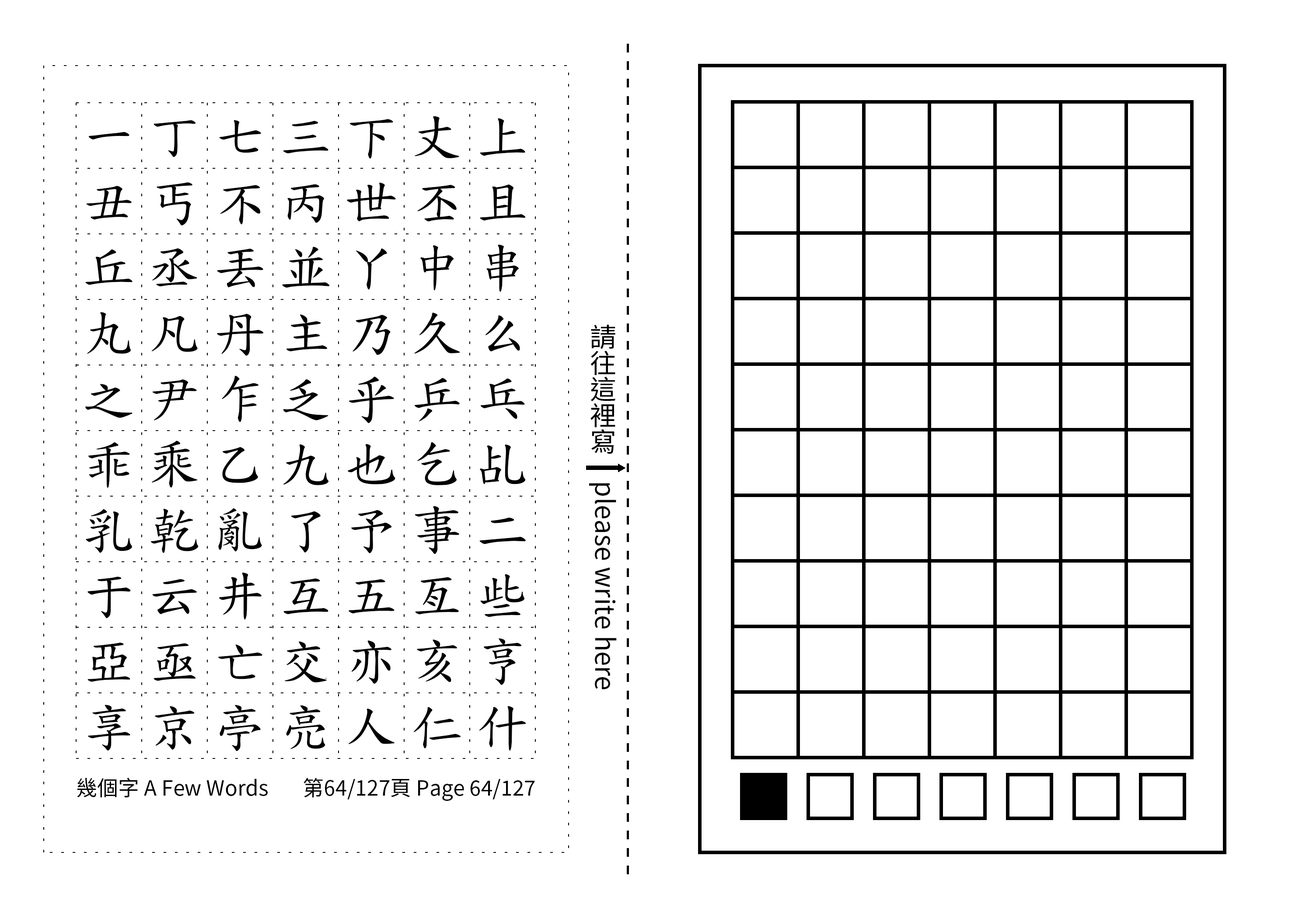
<style>
.page{position:relative;width:1299px;height:918px;background:#ffffff}
.page>*{position:absolute;margin:0}
.t1{font:52.5px/65.6px "TW-Kai-98_1";letter-spacing:0.25em;color:#000000}
.t2{font:26.2px "SourceHanSansTC-Regular";color:#000000}
.t3{font:21px "SourceHanSansTC-Regular";color:#000000}
</style>
<div class="page">
<p class="t1" style="left:85px;top:116px;width:441px;height:636px;text-align:center">一丁七三下丈上丑丐不丙世丕且丘丞丟並丫中串丸凡丹主乃久么之尹乍乏乎乒乓乖乘乙九也乞乩乳乾亂了予事二于云井互五亙些亞亟亡交亦亥亨享京亭亮人仁什</p>
<p class="t2" style="left:589px;top:324px;width:28px;height:366px;text-align:center">請往這裡寫　please write here</p>
<p class="t3" style="left:77px;top:778px;width:191px;height:20px">幾個字 A Few Words</p>
<p class="t3" style="left:303px;top:778px;width:232px;height:23px">第64/127頁 Page 64/127</p>
</div>
